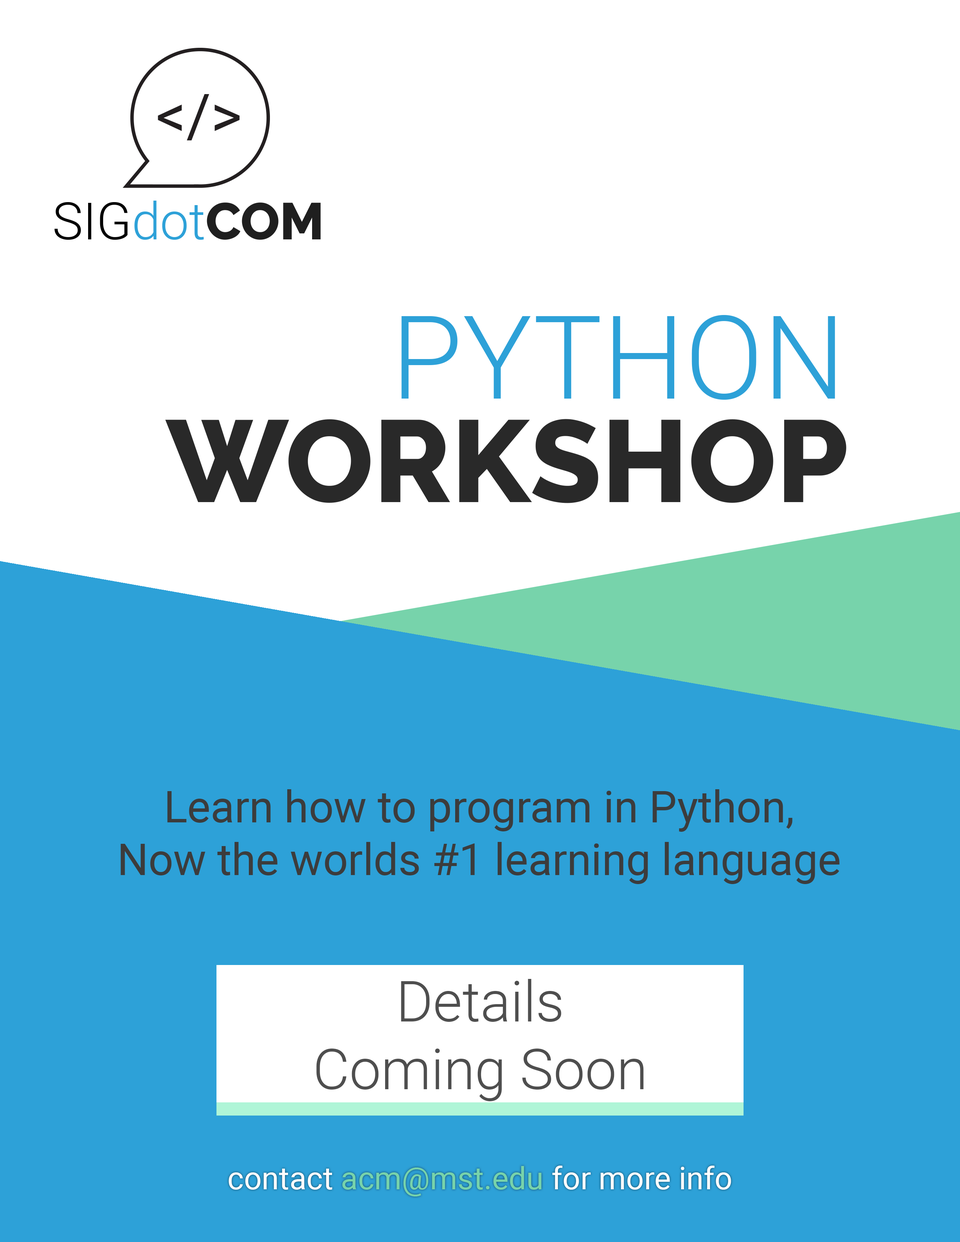
<style>
.page{position:relative;width:960px;height:1242px;background:#ffffff}
.page>*{position:absolute;margin:0}
.t1{font:51.4px "Roboto-Light";color:#000000}
.t2{font:51.4px "Roboto-Light";color:#2da1d8}
.t3{font:51.4px "Raleway-ExtraBold";color:#1f1f1f}
.t4{font:116.1px/103.5px "Raleway-ExtraBold";color:#292929}
.t5{font:116.1px/103.5px "Roboto-Light";color:#2da1d8}
.t6{font:43.9px "Roboto-Regular";color:#3c3c3c}
.t7{font:56.5px "Roboto-Light";color:#4e4e4e}
.t8{font:31.4px "Roboto-Regular";color:#ffffff}
.t9{font:31.4px "Roboto-Regular";color:#77d3ab}
</style>
<div class="page">
<p class="t1" style="left:54px;top:201px;width:267px;height:39px">SIG<span class="t2">dot</span><span class="t3">COM</span></p>
<p class="t4" style="left:165px;top:315px;width:681px;height:188px;text-align:right"><span class="t5">PYTHON<br></span>WORKSHOP</p>
<p class="t6" style="left:120px;top:789px;width:719px;height:95px;text-align:center">Learn how to program in Python,<br>Now the worlds #1 learning language</p>
<p class="t7" style="left:316px;top:979px;width:328px;height:122px;text-align:center">Details<br>Coming Soon</p>
<p class="t8" style="left:228px;top:1166px;width:503px;height:31px">contact <span class="t9">acm@mst.edu </span>for more info</p>
</div>
